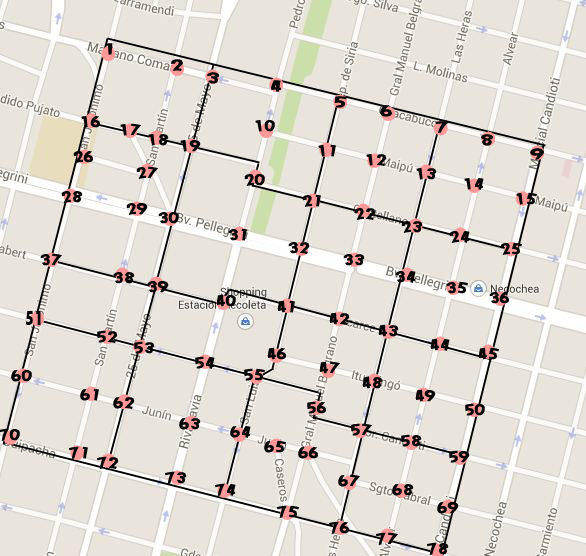
<style>
.page{position:relative;width:586px;height:556px;background:#e9e5dc}
.page>*{position:absolute;margin:0}
.t1{font:16px "TwCenMT-CondensedExtraBold";color:#040404}
.t2{font:21.9px "TwCenMT-CondensedExtraBold";color:#040404;scale:0.88 1}
</style>
<div class="page">
<p class="t1" style="left:120px;top:123px;width:21px;height:13px">17</p>
<p class="t1" style="left:148px;top:134px;width:21px;height:12px">18</p>
<p class="t1" style="left:180px;top:140px;width:21px;height:12px">19</p>
<p class="t1" style="left:73px;top:151px;width:20px;height:12px">26</p>
<p class="t1" style="left:136px;top:166px;width:22px;height:13px">27</p>
<p class="t1" style="left:244px;top:174px;width:21px;height:12px">20</p>
<p class="t1" style="left:61px;top:191px;width:22px;height:12px">28</p>
<p class="t1" style="left:302px;top:194px;width:19px;height:13px">21</p>
<p class="t1" style="left:126px;top:203px;width:22px;height:12px">29</p>
<p class="t1" style="left:354px;top:208px;width:22px;height:12px">22</p>
<p class="t1" style="left:158px;top:212px;width:21px;height:12px">30</p>
<p class="t1" style="left:401px;top:221px;width:22px;height:12px">23</p>
<p class="t1" style="left:228px;top:228px;width:19px;height:13px">31</p>
<p class="t1" style="left:449px;top:231px;width:21px;height:12px">24</p>
<p class="t1" style="left:288px;top:242px;width:22px;height:12px">32</p>
<p class="t1" style="left:500px;top:242px;width:22px;height:13px">25</p>
<p class="t1" style="left:40px;top:253px;width:22px;height:13px">37</p>
<p class="t1" style="left:343px;top:254px;width:22px;height:12px">33</p>
<p class="t1" style="left:113px;top:272px;width:22px;height:12px">38</p>
<p class="t1" style="left:147px;top:281px;width:22px;height:12px">39</p>
<p class="t1" style="left:395px;top:271px;width:21px;height:12px">34</p>
<p class="t1" style="left:446px;top:281px;width:22px;height:13px">35</p>
<p class="t1" style="left:216px;top:294px;width:20px;height:13px">40</p>
<p class="t1" style="left:489px;top:292px;width:20px;height:12px">36</p>
<p class="t1" style="left:277px;top:300px;width:18px;height:13px">41</p>
<p class="t2" style="left:25px;top:311px;width:16px;height:14px">51</p>
<p class="t1" style="left:329px;top:312px;width:21px;height:13px">42</p>
<p class="t1" style="left:378px;top:324px;width:21px;height:13px">43</p>
<p class="t1" style="left:97px;top:330px;width:21px;height:13px">52</p>
<p class="t1" style="left:134px;top:341px;width:21px;height:13px">53</p>
<p class="t1" style="left:430px;top:338px;width:20px;height:13px">44</p>
<p class="t1" style="left:267px;top:347px;width:19px;height:13px">46</p>
<p class="t1" style="left:478px;top:347px;width:21px;height:13px">45</p>
<p class="t1" style="left:195px;top:356px;width:20px;height:13px">54</p>
<p class="t1" style="left:319px;top:361px;width:21px;height:13px">47</p>
<p class="t1" style="left:11px;top:370px;width:21px;height:12px">60</p>
<p class="t1" style="left:244px;top:368px;width:21px;height:13px">55</p>
<p class="t1" style="left:362px;top:376px;width:21px;height:13px">48</p>
<p class="t1" style="left:80px;top:388px;width:19px;height:13px">61</p>
<p class="t1" style="left:415px;top:389px;width:21px;height:13px">49</p>
<p class="t1" style="left:113px;top:397px;width:22px;height:12px">62</p>
<p class="t1" style="left:307px;top:401px;width:19px;height:13px">56</p>
<p class="t1" style="left:465px;top:403px;width:20px;height:13px">50</p>
<p class="t1" style="left:179px;top:418px;width:22px;height:12px">63</p>
<p class="t1" style="left:351px;top:423px;width:21px;height:13px">57</p>
<p class="t1" style="left:0px;top:428px;width:20px;height:13px">70</p>
<p class="t1" style="left:230px;top:426px;width:21px;height:12px">64</p>
<p class="t1" style="left:401px;top:434px;width:21px;height:13px">58</p>
<p class="t1" style="left:69px;top:446px;width:19px;height:13px">71</p>
<p class="t1" style="left:264px;top:440px;width:22px;height:13px">65</p>
<p class="t1" style="left:298px;top:447px;width:20px;height:12px">66</p>
<p class="t1" style="left:97px;top:456px;width:22px;height:13px">72</p>
<p class="t1" style="left:449px;top:450px;width:21px;height:13px">59</p>
<p class="t1" style="left:165px;top:471px;width:22px;height:13px">73</p>
<p class="t1" style="left:215px;top:483px;width:21px;height:13px">74</p>
<p class="t1" style="left:338px;top:474px;width:22px;height:13px">67</p>
<p class="t1" style="left:392px;top:484px;width:22px;height:12px">68</p>
<p class="t1" style="left:277px;top:505px;width:22px;height:13px">75</p>
<p class="t1" style="left:437px;top:502px;width:22px;height:12px">69</p>
<p class="t1" style="left:329px;top:521px;width:20px;height:13px">76</p>
<p class="t1" style="left:376px;top:532px;width:22px;height:13px">77</p>
<p class="t1" style="left:427px;top:542px;width:22px;height:13px">78</p>
</div>
